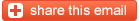
<style>
.page{position:relative;width:140px;height:21px}
.page>*{position:absolute;margin:0}
.t1{font:13.5px "ArialMT";color:#f9fffb}
</style>
<div class="page">
<p class="t1" style="left:30px;top:5px;width:96px;height:10px">share this email</p>
</div>
